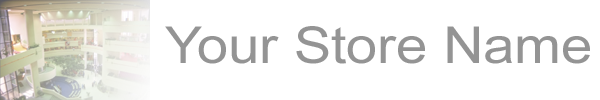
<style>
.page{position:relative;width:600px;height:100px;background:#ffffff}
.page>*{position:absolute;margin:0}
.t1{font:50.8px "ArialMT";color:#949494;scale:1.1 1}
</style>
<div class="page">
<p class="t1" style="left:165px;top:26px;width:425px;height:38px">Your Store Name</p>
</div>
